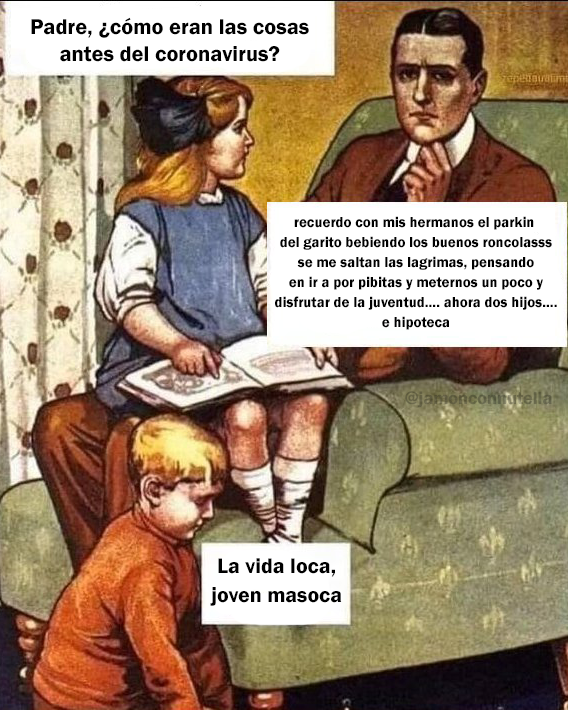
<style>
.page{position:relative;width:568px;height:710px}
.page>*{position:absolute;margin:0}
.t1{font:22.3px "FranklinGothic-Demi";color:#000000}
.t2{font:15.1px "FranklinGothic-Demi";color:#000000}
.t3{font:18.2px "FranklinGothic-Demi";color:#656347}
.t4{font:21.8px "FranklinGothic-Demi";color:#000000}
</style>
<div class="page">
<p class="t1" style="left:31px;top:17px;width:278px;height:45px;text-align:center">Padre, ¿cómo eran las cosas<br>antes del coronavirus?</p>
<p class="t2" style="left:275px;top:216px;width:282px;height:114px;text-align:center">recuerdo con mis hermanos el parkin <br>del garito bebiendo los buenos roncolasss<br>se me saltan las lagrimas, pensando<br>en ir a por pibitas y meternos un poco y<br>disfrutar de la juventud.... ahora dos hijos....<br>e hipoteca</p>
<p class="t3" style="left:405px;top:391px;width:147px;height:17px">@jamonconnutella</p>
<p class="t4" style="left:210px;top:558px;width:132px;height:48px;text-align:center">La vida loca,<br>joven masoca</p>
</div>
